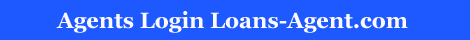
<style>
.page{position:relative;width:470px;height:40px;background:#1e59ff}
.page>*{position:absolute;margin:0}
.t1{font:22px "Georgia-Bold";color:#fbfaff}
</style>
<div class="page">
<p class="t1" style="left:56px;top:11px;width:352px;height:22px">Agents Login Loans-Agent.com</p>
</div>
